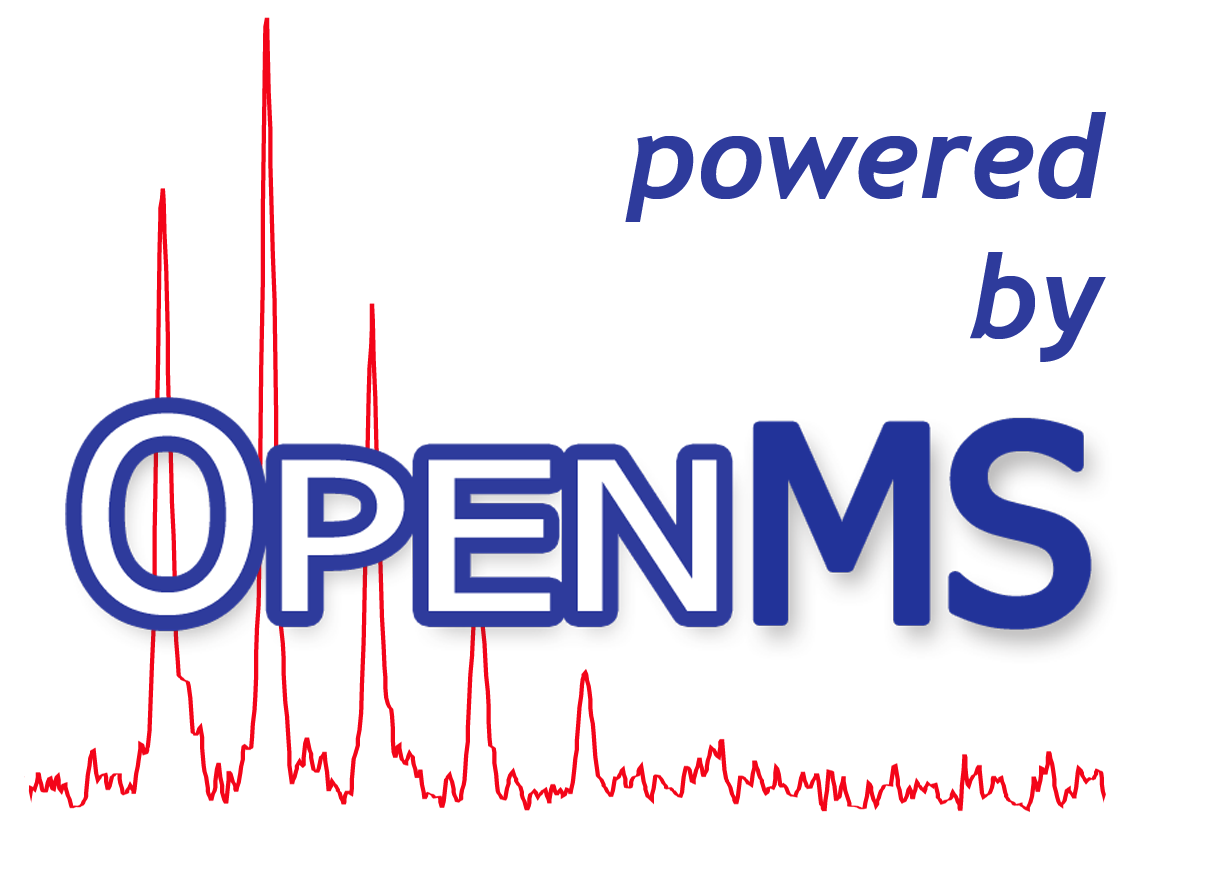
<style>
.page{position:relative;width:1208px;height:878px;background:#ffffff}
.page>*{position:absolute;margin:0}
.t1{font:116.7px "Trebuchet-BoldItalic";color:#2e3b9c}
</style>
<div class="page">
<p class="t1" style="left:625px;top:112px;width:481px;height:250px;text-align:right">powered<br>by</p>
</div>
